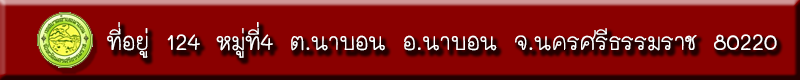
<style>
.page{position:relative;width:800px;height:80px;background:#8a0000}
.page>*{position:absolute;margin:0}
.t1{font:38px "THMaliGrade6-Bold";color:#ffffff}
</style>
<div class="page">
<p class="t1" style="left:107px;top:22px;width:670px;height:36px">ที่อยู่ 124 หมู่ที่4 ต.นาบอน อ.นาบอน จ.นครศรีธรรมราช 80220</p>
</div>
